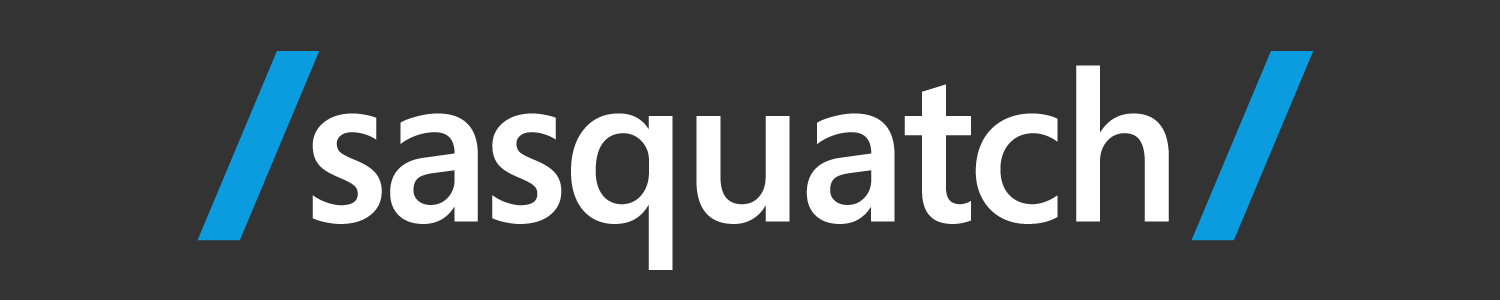
<style>
.page{position:relative;width:1500px;height:300px;background:#333333}
.page>*{position:absolute;margin:0}
.t1{font:231.5px "SegoeProBlack";letter-spacing:-0.025em;color:#0b9ce0}
.t2{font:210.4px "SegoePro-Semibold";letter-spacing:-0.025em;color:#ffffff}
</style>
<div class="page">
<p class="t1" style="left:197px;top:51px;width:123px;height:190px">/</p>
<p class="t1" style="left:1191px;top:51px;width:123px;height:190px">/</p>
<p class="t2" style="left:312px;top:65px;width:857px;height:205px">sasquatch</p>
</div>
